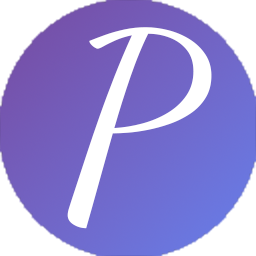
<style>
.page{position:relative;width:256px;height:256px;background:#ffffff}
.page>*{position:absolute;margin:0}
.t1{font:249px "DancingScript-Medium";color:#ffffff}
</style>
<div class="page">
<p class="t1" style="left:67px;top:27px;width:145px;height:202px">P</p>
</div>
